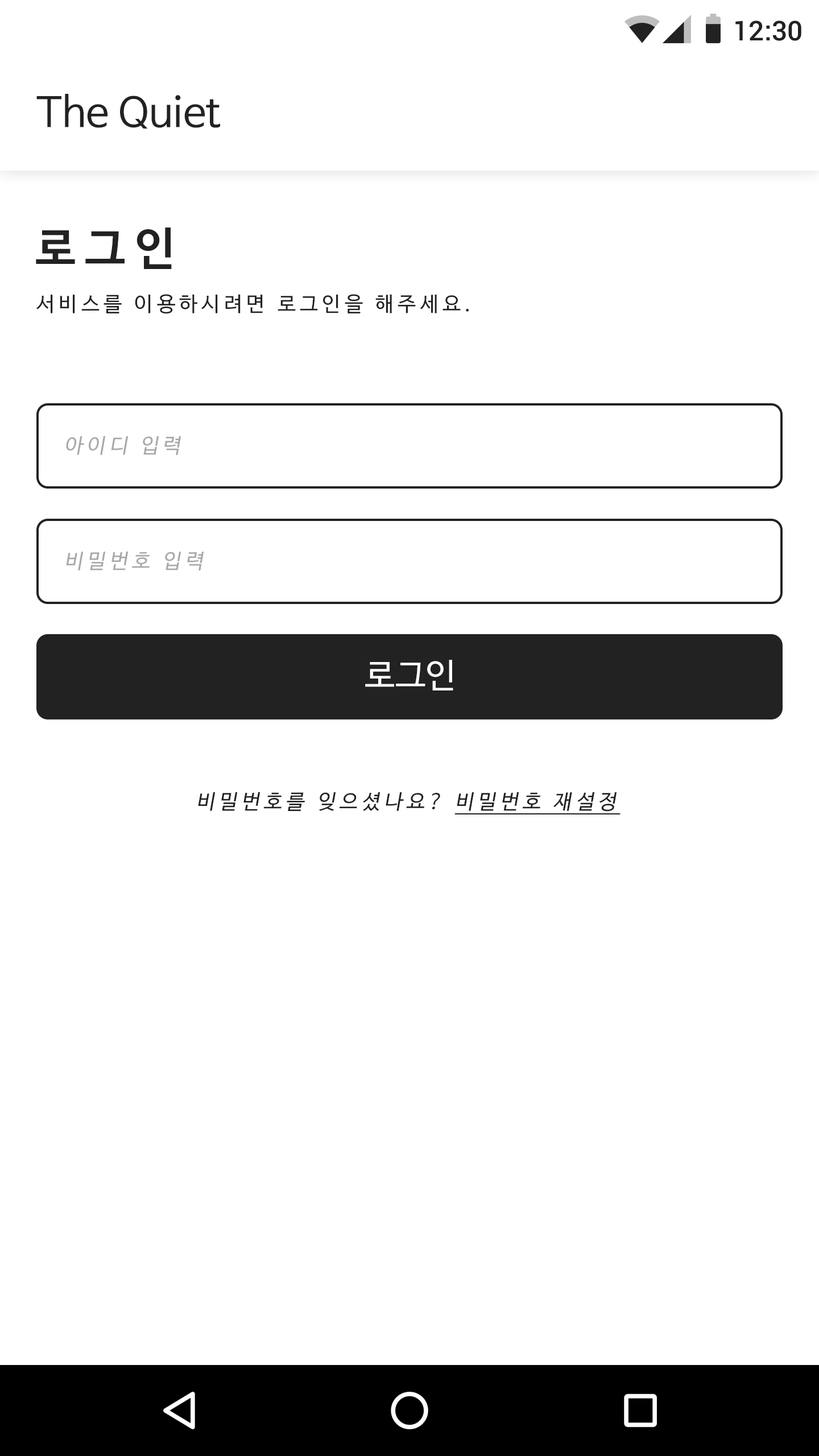
<style>
.page{position:relative;width:819px;height:1456px;background:#ffffff}
.page>*{position:absolute;margin:0}
.t1{font:27.3px "Roboto-Medium";color:#222222}
.t2{font:40.9px "NanumBarunGothic";color:#222222}
.t3{font:45.5px "NanumBarunGothicBold";letter-spacing:0.2em;color:#222222}
.t4{font:20.5px "NanumBarunGothic";letter-spacing:0.2em;color:#222222}
.t5{font:20.5px "NanumBarunGothic";letter-spacing:0.2em;color:#a9a9a9;font-style:italic}
.t6{font:34.1px "NanumBarunGothic";color:#ffffff}
.t7{font:20.5px "NanumBarunGothic";letter-spacing:0.2em;color:#222222;font-style:italic}
.t8{font:20.5px "NanumBarunGothic";letter-spacing:0.2em;color:#222222;font-style:italic;text-decoration:underline}
</style>
<div class="page">
<p class="t1" style="left:735px;top:20px;width:66px;height:21px">12:30</p>
<p class="t2" style="left:36px;top:94px;width:184px;height:35px">The Quiet</p>
<p class="t3" style="left:36px;top:227px;width:136px;height:42px">로그인</p>
<p class="t4" style="left:36px;top:294px;width:433px;height:20px">서비스를 이용하시려면 로그인을 해주세요.</p>
<p class="t5" style="left:66px;top:436px;width:115px;height:19px">아이디 입력</p>
<p class="t5" style="left:66px;top:551px;width:138px;height:19px">비밀번호 입력</p>
<p class="t6" style="left:365px;top:660px;width:88px;height:30px">로그인</p>
<p class="t7" style="left:198px;top:792px;width:422px;height:22px">비밀번호를 잊으셨나요? <span class="t8">비밀번호 재설정</span></p>
</div>
